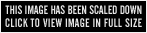
<style>
.page{position:relative;width:147px;height:33px;background:#000000}
.page>*{position:absolute;margin:0}
.t1{font:12px "AlternateGothicNo2BT-Regular";color:#e5e5e5;text-transform:uppercase}
.t2{font:11.9px "AlternateGothicNo2BT-Regular";letter-spacing:0.024em;color:#e5e5e5;text-transform:uppercase}
</style>
<div class="page">
<p class="t1" style="left:5px;top:5px;width:137px;height:9px">this image has been scaled down</p>
<p class="t2" style="left:5px;top:18px;width:137px;height:9px">click to view image in full size</p>
</div>
